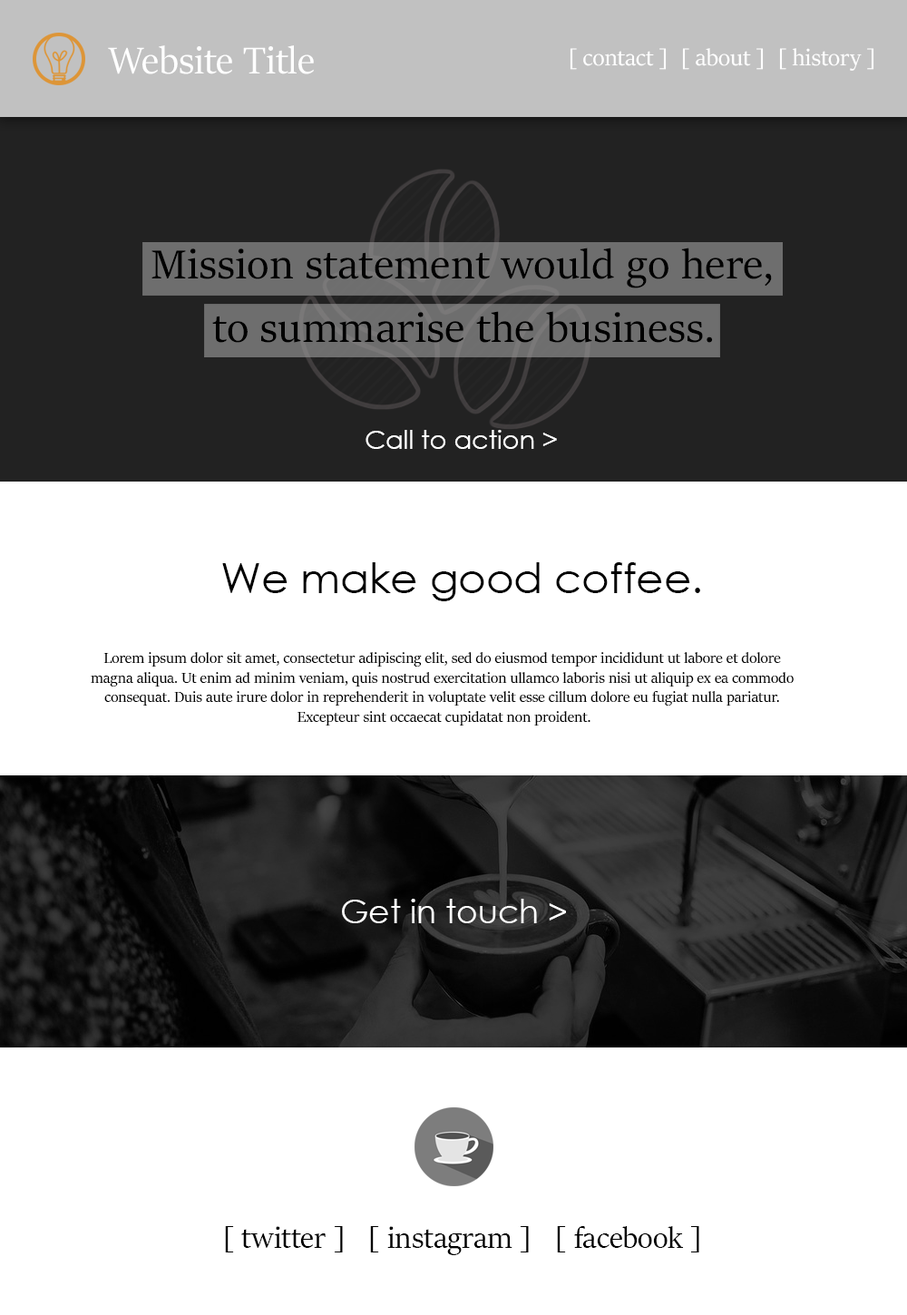
<style>
.page{position:relative;width:907px;height:1315px;background:#ffffff}
.page>*{position:absolute;margin:0}
.t1{font:41.8px "SitkaBanner";color:#ffffff}
.t2{font:25.3px "SitkaBanner";color:#ffffff}
.t3{font:25.7px "CenturyGothic";color:#ffffff}
.t4{font:42px "CenturyGothic";color:#000000}
.t5{font:16.3px "SitkaBanner";color:#000000}
.t6{font:32.6px "CenturyGothic";color:#ffffff}
.t7{font:32.6px "SitkaBanner";color:#000000}
</style>
<div class="page">
<p class="t1" style="left:108px;top:45px;width:206px;height:29px">Website Title</p>
<p class="t2" style="left:569px;top:48px;width:305px;height:23px">[ contact ]  [ about ]  [ history ]</p>
<p class="t3" style="left:365px;top:430px;width:192px;height:19px">Call to action &gt;</p>
<p class="t4" style="left:222px;top:562px;width:478px;height:39px">We make good coffee.</p>
<p class="t5" style="left:91px;top:652px;width:702px;height:73px;text-align:center">Lorem ipsum dolor sit amet, consectetur adipiscing elit, sed do eiusmod tempor incididunt ut labore et dolore <br>magna aliqua. Ut enim ad minim veniam, quis nostrud exercitation ullamco laboris nisi ut aliquip ex ea commodo <br>consequat. Duis aute irure dolor in reprehenderit in voluptate velit esse cillum dolore eu fugiat nulla pariatur. <br>Excepteur sint occaecat cupidatat non proident.</p>
<p class="t6" style="left:342px;top:899px;width:224px;height:24px">Get in touch &gt;</p>
<p class="t7" style="left:225px;top:1226px;width:474px;height:29px">[ twitter ]   [ instagram ]   [ facebook ]</p>
</div>
